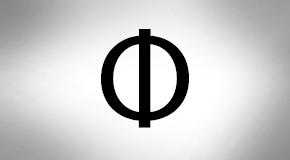
<style>
.page{position:relative;width:290px;height:160px}
.page>*{position:absolute;margin:0}
.t1{font:135.9px "MyriadPro-Regular";color:#010101;text-transform:uppercase}
</style>
<div class="page">
<p class="t1" style="left:101px;top:29px;width:88px;height:99px">Φ</p>
</div>
